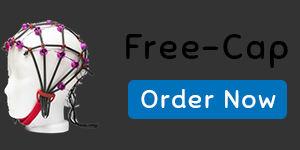
<style>
.page{position:relative;width:300px;height:150px;background:#333333}
.page>*{position:absolute;margin:0}
.t1{font:34.7px "Sniglet-Regular";letter-spacing:0.08em;color:#000000}
.t2{font:25.6px "Sniglet-Regular";letter-spacing:0.08em;color:#ffffff}
</style>
<div class="page">
<p class="t1" style="left:126px;top:34px;width:162px;height:34px">Free-Cap</p>
<p class="t2" style="left:141px;top:89px;width:135px;height:19px">Order Now</p>
</div>
